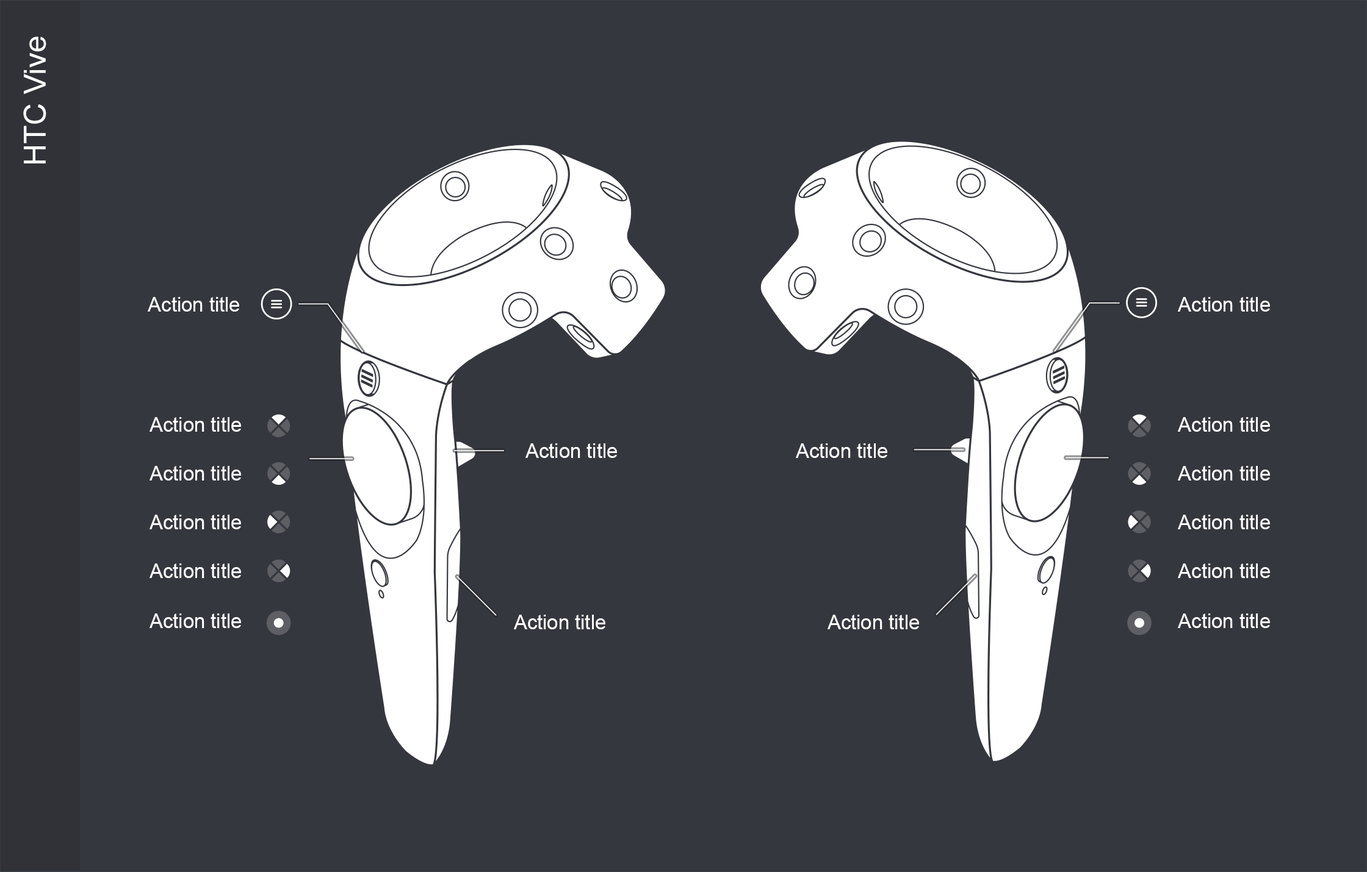
<style>
.page{position:relative;width:1367px;height:872px;background:#35373e}
.page>*{position:absolute;margin:0}
.t1{font:30.5px "ArialMT";color:#ffffff}
.t2{font:20px "ArialMT";color:#ffffff}
</style>
<div class="page">
<p class="t1" style="left:23px;top:37px;width:23px;height:127px;rotate:-90deg">HTC Vive</p>
<p class="t2" style="left:148px;top:297px;width:91px;height:15px">Action title</p>
<p class="t2" style="left:1178px;top:297px;width:92px;height:15px">Action title</p>
<p class="t2" style="left:149px;top:417px;width:92px;height:15px">Action title</p>
<p class="t2" style="left:1178px;top:417px;width:92px;height:15px">Action title</p>
<p class="t2" style="left:525px;top:444px;width:92px;height:14px">Action title</p>
<p class="t2" style="left:796px;top:444px;width:91px;height:14px">Action title</p>
<p class="t2" style="left:149px;top:466px;width:92px;height:15px">Action title</p>
<p class="t2" style="left:1178px;top:466px;width:92px;height:15px">Action title</p>
<p class="t2" style="left:149px;top:515px;width:92px;height:15px">Action title</p>
<p class="t2" style="left:1178px;top:515px;width:92px;height:15px">Action title</p>
<p class="t2" style="left:149px;top:564px;width:92px;height:14px">Action title</p>
<p class="t2" style="left:1178px;top:564px;width:92px;height:14px">Action title</p>
<p class="t2" style="left:149px;top:614px;width:92px;height:14px">Action title</p>
<p class="t2" style="left:514px;top:615px;width:91px;height:15px">Action title</p>
<p class="t2" style="left:827px;top:615px;width:92px;height:15px">Action title</p>
<p class="t2" style="left:1178px;top:614px;width:92px;height:14px">Action title</p>
</div>
